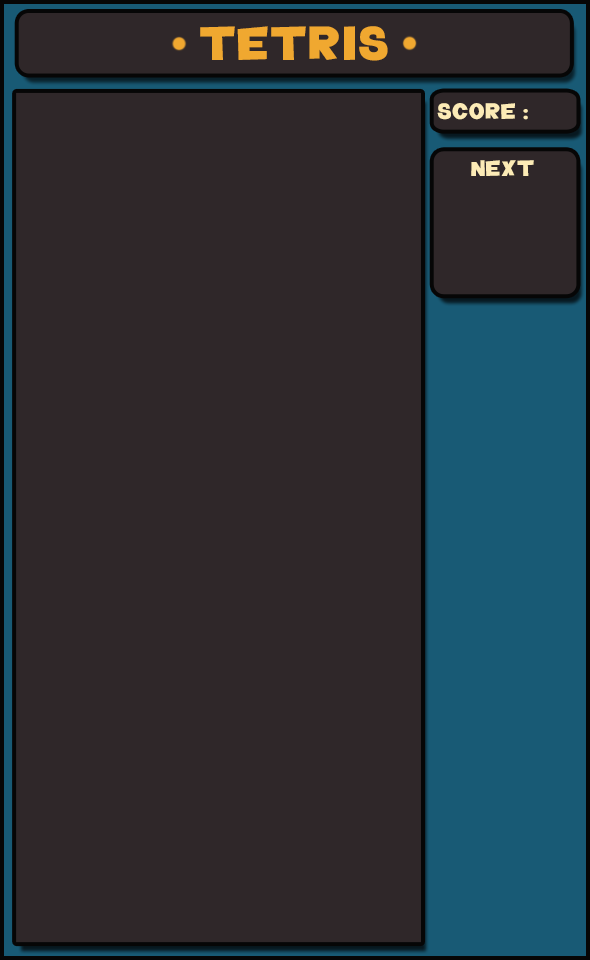
<style>
.page{position:relative;width:590px;height:960px;background:#2f2729}
.page>*{position:absolute;margin:0}
.t1{font:48px "TeletoonLowercase";letter-spacing:0.025em;color:#f0a830}
.t2{font:22.5px "TeletoonLowercase";letter-spacing:0.025em;color:#fcebb6}
</style>
<div class="page">
<p class="t1" style="left:200px;top:26px;width:188px;height:35px">TETRIS</p>
<p class="t2" style="left:437px;top:103px;width:91px;height:17px">SCORE :</p>
<p class="t2" style="left:471px;top:160px;width:63px;height:16px">NEXT</p>
</div>
